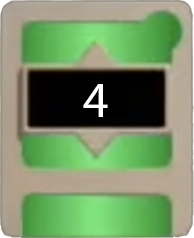
<style>
.page{position:relative;width:194px;height:238px}
.page>*{position:absolute;margin:0}
.t1{font:50px "MyriadPro-Regular";color:#ffffff}
</style>
<div class="page">
<p class="t1" style="left:83px;top:84px;width:25px;height:33px">4</p>
</div>
